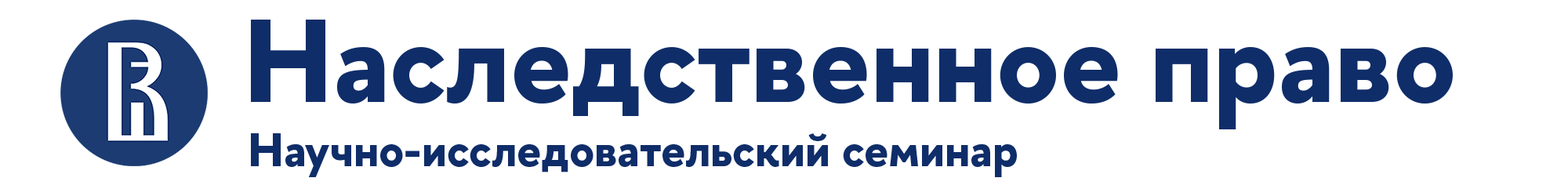
<style>
.page{position:relative;width:1568px;height:196px;background:#ffffff}
.page>*{position:absolute;margin:0}
.t1{font:117.6px "HSESans-Bold";color:#0f2d69}
.t2{font:47px "HSESans-Bold";color:#0f2d69}
</style>
<div class="page">
<p class="t1" style="left:251px;top:20px;width:1202px;height:109px">Наследственное право</p>
<p class="t2" style="left:251px;top:133px;width:766px;height:44px">Научно-исследовательский семинар</p>
</div>
